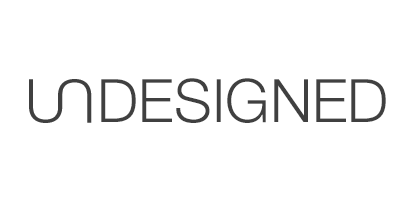
<style>
.page{position:relative;width:400px;height:200px;background:#ffffff}
.page>*{position:absolute;margin:0}
.t1{font:60px "HelveticaNeue-Light";color:#404040}
</style>
<div class="page">
<p class="t1" style="left:101px;top:78px;width:285px;height:45px">DESIGNED</p>
</div>
